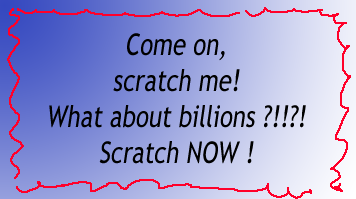
<style>
.page{position:relative;width:356px;height:199px}
.page>*{position:absolute;margin:0}
.t1{font:30px "TrebuchetMS";color:#000000;font-style:italic;scale:0.8 1}
</style>
<div class="page">
<p class="t1" style="left:49px;top:33px;width:257px;height:131px;text-align:center">Come on,<br>scratch me!<br>What about billions ?!!?!<br>Scratch NOW !</p>
</div>
